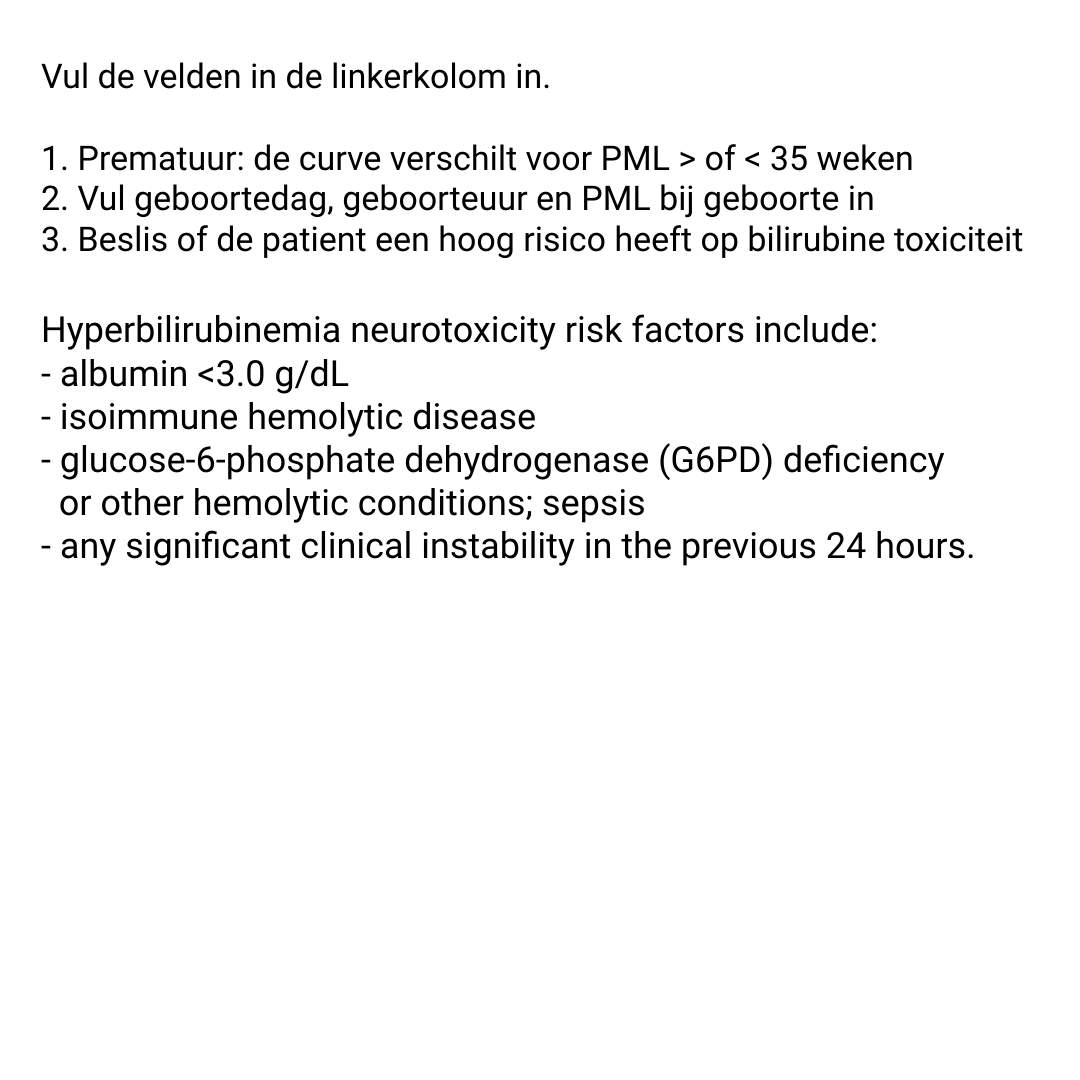
<style>
.page{position:relative;width:1080px;height:1080px;background:#ffffff}
.page>*{position:absolute;margin:0}
.t1{font:36px "Roboto-Regular";color:#000000}
.t2{font:34px "Roboto-Regular";color:#000000}
</style>
<div class="page">
<p class="t1" style="left:41px;top:62px;width:982px;height:504px"><span class="t2">Vul de velden in de linkerkolom in.<br><br>1. Prematuur: de curve verschilt voor PML &gt; of &lt; 35 weken<br>2. Vul geboortedag, geboorteuur en PML bij geboorte in<br>3. Beslis of de patient een hoog risico heeft op bilirubine toxiciteit<br><br></span>Hyperbilirubinemia neurotoxicity risk factors include:<br>- albumin &lt;3.0 g/dL<br>- isoimmune hemolytic disease<br>- glucose-6-phosphate dehydrogenase (G6PD) deficiency<br>  or other hemolytic conditions; sepsis<br>- any significant clinical instability in the previous 24 hours.</p>
</div>
